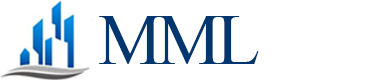
<style>
.page{position:relative;width:384px;height:80px;background:#ffffff}
.page>*{position:absolute;margin:0}
.t1{font:72.2px "TimesNewRomanPSMT";letter-spacing:-0.075em;color:#00366f;text-transform:uppercase}
</style>
<div class="page">
<p class="t1" style="left:99px;top:16px;width:160px;height:48px">mml</p>
</div>
